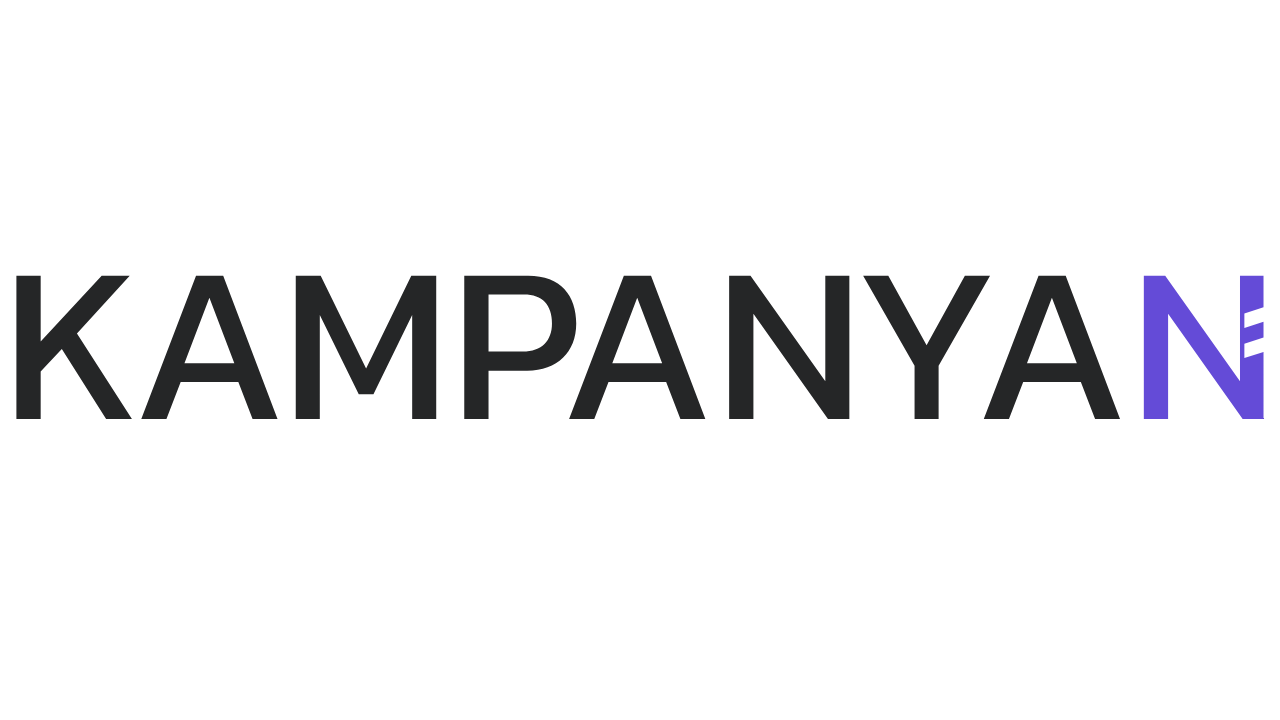
<style>
.page{position:relative;width:1280px;height:720px;background:#ffffff}
.page>*{position:absolute;margin:0}
.t1{font:222.6px "Kanit-Regular";color:#252627}
.t2{font:222.6px "Kanit-Regular";color:#644bd7}
</style>
<div class="page">
<p class="t1" style="left:16px;top:275px;width:1249px;height:144px">KAMPANYA<span class="t2">N</span></p>
</div>
